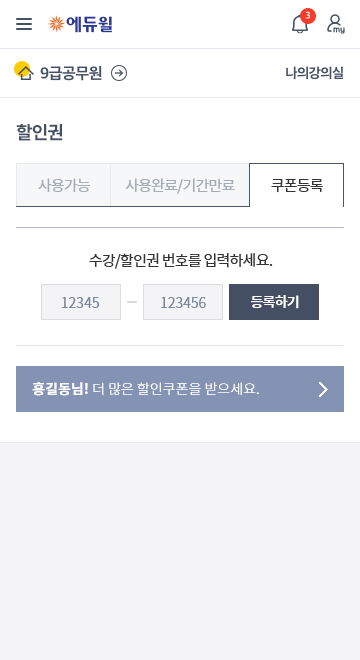
<style>
.page{position:relative;width:360px;height:660px;background:#ffffff}
.page>*{position:absolute;margin:0}
.t1{font:18px "NotoSansCJKkr-Bold";letter-spacing:-0.05em;color:#454f63}
.t2{font:15px "NotoSansCJKkr-Regular";letter-spacing:-0.05em;color:#a4acb5}
.t3{font:15px "NotoSansCJKkr-Regular";letter-spacing:-0.05em;color:#333333}
.t4{font:14px "NotoSansCJKkr-DemiLight";color:#78849e}
.t5{font:14px "NotoSansCJKkr-Medium";letter-spacing:-0.05em;color:#ffffff}
.t6{font:14px "NotoSansCJKkr-Light";color:#ffffff}
.t7{font:14px "NotoSansCJKkr-Bold";color:#ffffff}
</style>
<div class="page">
<p class="t1" style="left:16px;top:124px;width:47px;height:17px">할인권</p>
<p class="t2" style="left:38px;top:178px;width:52px;height:14px">사용가능</p>
<p class="t2" style="left:125px;top:178px;width:110px;height:16px">사용완료/기간만료</p>
<p class="t3" style="left:271px;top:179px;width:52px;height:14px">쿠폰등록</p>
<p class="t3" style="left:89px;top:253px;width:184px;height:16px">수강/할인권 번호를 입력하세요.</p>
<p class="t4" style="left:61px;top:297px;width:38px;height:11px">12345</p>
<p class="t4" style="left:161px;top:297px;width:45px;height:11px">123456</p>
<p class="t5" style="left:251px;top:295px;width:48px;height:14px">등록하기</p>
<p class="t6" style="left:32px;top:382px;width:227px;height:14px"><span class="t7">홍길동님! </span>더 많은 할인쿠폰을 받으세요.</p>
</div>
